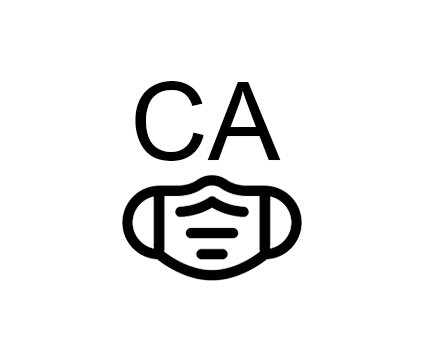
<style>
.page{position:relative;width:429px;height:348px;background:#ffffff}
.page>*{position:absolute;margin:0}
.t1{font:108px "ArialMT";color:#000000}
</style>
<div class="page">
<p class="t1" style="left:135px;top:81px;width:146px;height:80px">CA</p>
</div>
